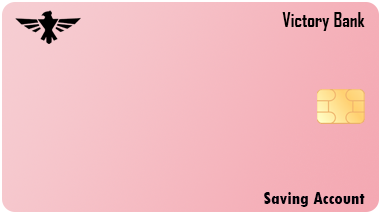
<style>
.page{position:relative;width:380px;height:213px}
.page>*{position:absolute;margin:0}
.t1{font:19px "AgencyFB-Bold";color:#000000}
.t2{font:18px "TwCenMT-CondensedExtraBold";color:#010007}
</style>
<div class="page">
<p class="t1" style="left:282px;top:12px;width:83px;height:19px">Victory Bank</p>
<p class="t2" style="left:264px;top:192px;width:101px;height:15px">Saving Account</p>
</div>
